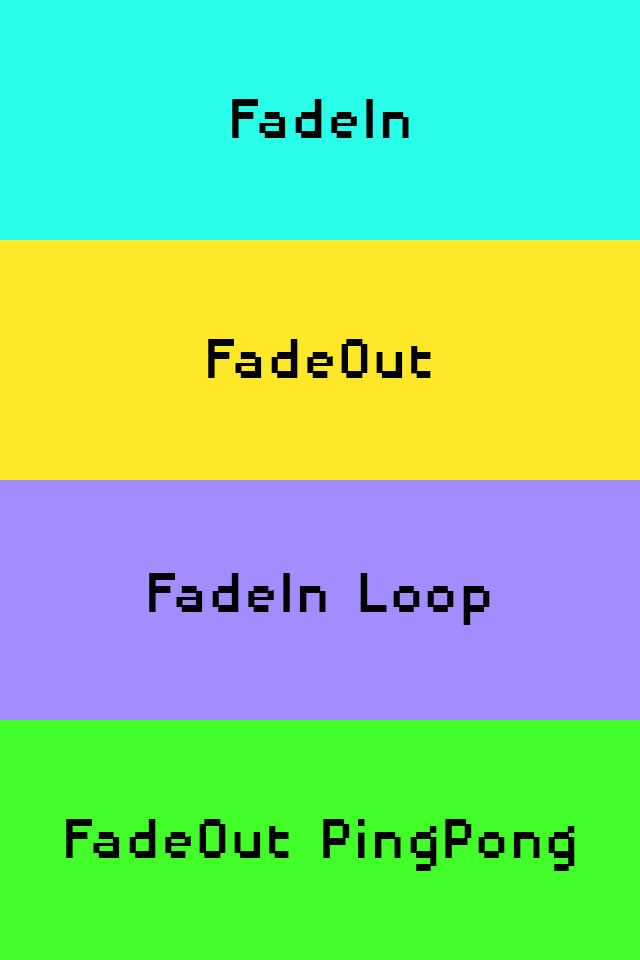
<style>
.page{position:relative;width:640px;height:960px;background:#29fee8}
.page>*{position:absolute;margin:0}
.t1{font:72.6px "DisposableDroidBB";color:#000000}
.t2{font:72.6px "DisposableDroidBB";color:#010101}
</style>
<div class="page">
<p class="t1" style="left:232px;top:99px;width:177px;height:39px">FadeIn</p>
<p class="t1" style="left:208px;top:339px;width:223px;height:39px">FadeOut</p>
<p class="t2" style="left:149px;top:573px;width:341px;height:52px">FadeIn Loop</p>
<p class="t2" style="left:66px;top:819px;width:509px;height:52px">FadeOut PingPong</p>
</div>
